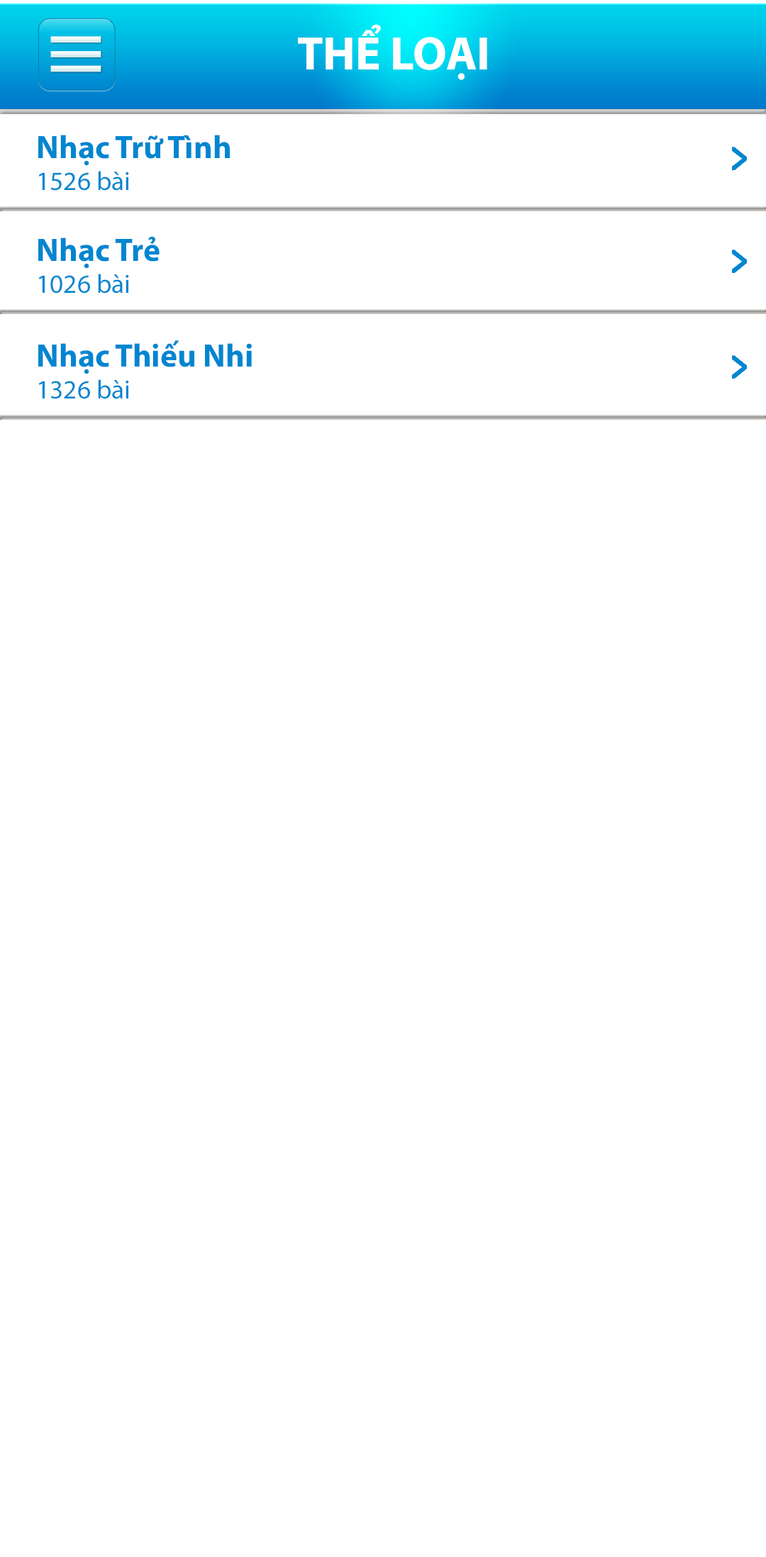
<style>
.page{position:relative;width:766px;height:1557px;background:#ffffff}
.page>*{position:absolute;margin:0}
.t1{font:47.3px "MyriadPro-Bold";color:#ffffff}
.t2{font:32.5px "MyriadPro-Bold";color:#0086d0}
.t3{font:26.6px "MyriadPro-Regular";color:#0086d0}
</style>
<div class="page">
<p class="t1" style="left:298px;top:24px;width:189px;height:56px">THỂ LOẠI</p>
<p class="t2" style="left:38px;top:135px;width:192px;height:56px">Nhạc Trữ Tình<br><span class="t3">1526 bài</span></p>
<p class="t2" style="left:38px;top:236px;width:122px;height:58px">Nhạc Trẻ<br><span class="t3">1026 bài</span></p>
<p class="t2" style="left:38px;top:340px;width:214px;height:59px">Nhạc Thiếu Nhi<br><span class="t3">1326 bài</span></p>
</div>
